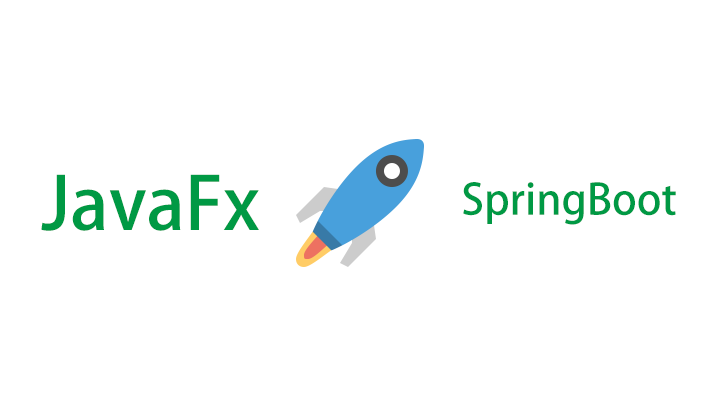
<style>
.page{position:relative;width:720px;height:405px;background:#ffffff}
.page>*{position:absolute;margin:0}
.t1{font:72px "AdobeHeitiStd-Regular";color:#009944}
.t2{font:42px "AdobeHeitiStd-Regular";color:#009944}
</style>
<div class="page">
<p class="t1" style="left:41px;top:174px;width:218px;height:57px">JavaFx</p>
<p class="t2" style="left:463px;top:182px;width:213px;height:43px">SpringBoot</p>
</div>
